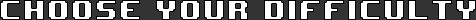
<style>
.page{position:relative;width:476px;height:20px;background:#333333}
.page>*{position:absolute;margin:0}
.t1{font:24px "8BITWONDERNominal";color:#ffffff}
</style>
<div class="page">
<p class="t1" style="left:0px;top:0px;width:476px;height:20px">Choose your Difficulty</p>
</div>
